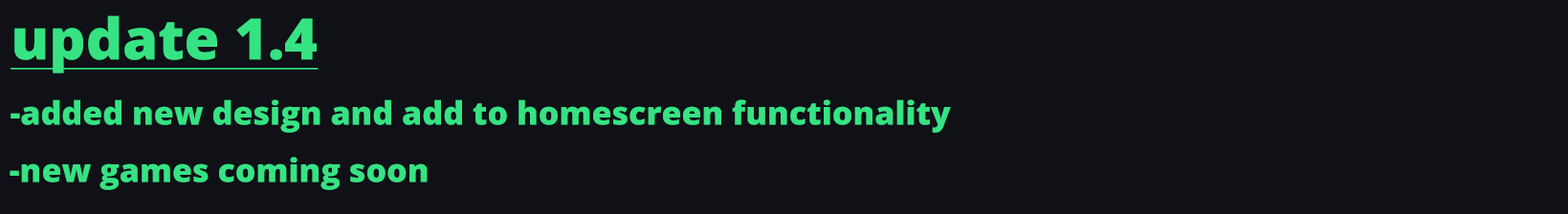
<style>
.page{position:relative;width:1568px;height:214px;background:#0f1117}
.page>*{position:absolute;margin:0}
.t1{font:57.1px "OpenSans-ExtraBold";color:#36e383;text-decoration:underline}
.t2{font:32.5px "OpenSans-ExtraBold";color:#36e383}
</style>
<div class="page">
<p class="t1" style="left:11px;top:15px;width:308px;height:59px">update 1.4</p>
<p class="t2" style="left:11px;top:99px;width:940px;height:34px">-added new design and add to homescreen functionality</p>
<p class="t2" style="left:10px;top:157px;width:418px;height:33px">-new games coming soon</p>
</div>
